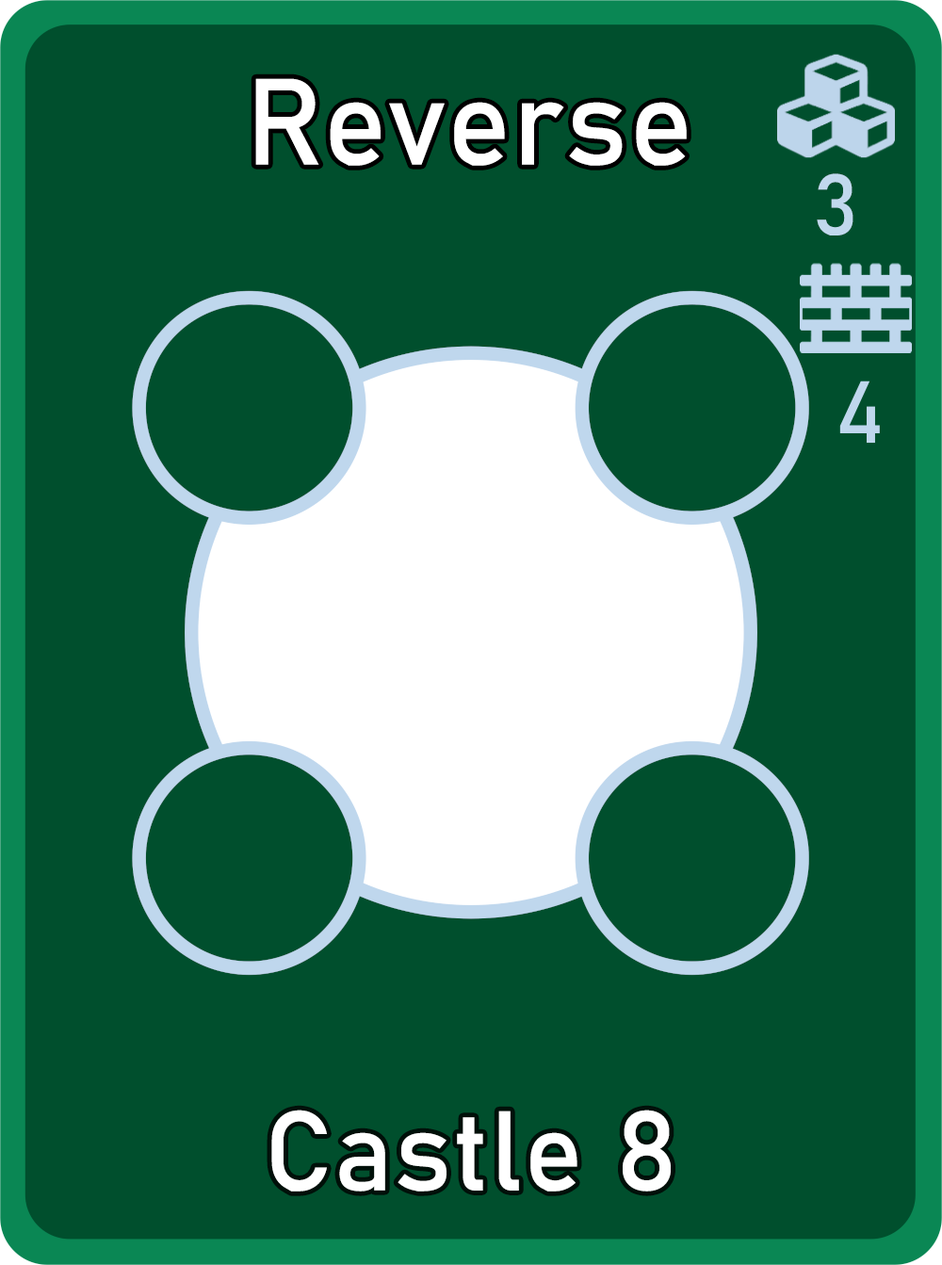
<style>
.page{position:relative;width:942px;height:1265px;background:#004f2d}
.page>*{position:absolute;margin:0}
.t1{font:120.6px "Bahnschrift";letter-spacing:0.01em;color:#ffffff}
.t2{font:85px "Bahnschrift";letter-spacing:0.01em;color:#c1d8ed}
.t3{font:111.3px "Bahnschrift";letter-spacing:0.01em;color:#ffffff}
</style>
<div class="page">
<p class="t1" style="left:255px;top:78px;width:432px;height:88px">Reverse</p>
<p class="t2" style="left:817px;top:173px;width:37px;height:63px">3</p>
<p class="t3" style="left:271px;top:1110px;width:400px;height:82px">Castle 8</p>
</div>
